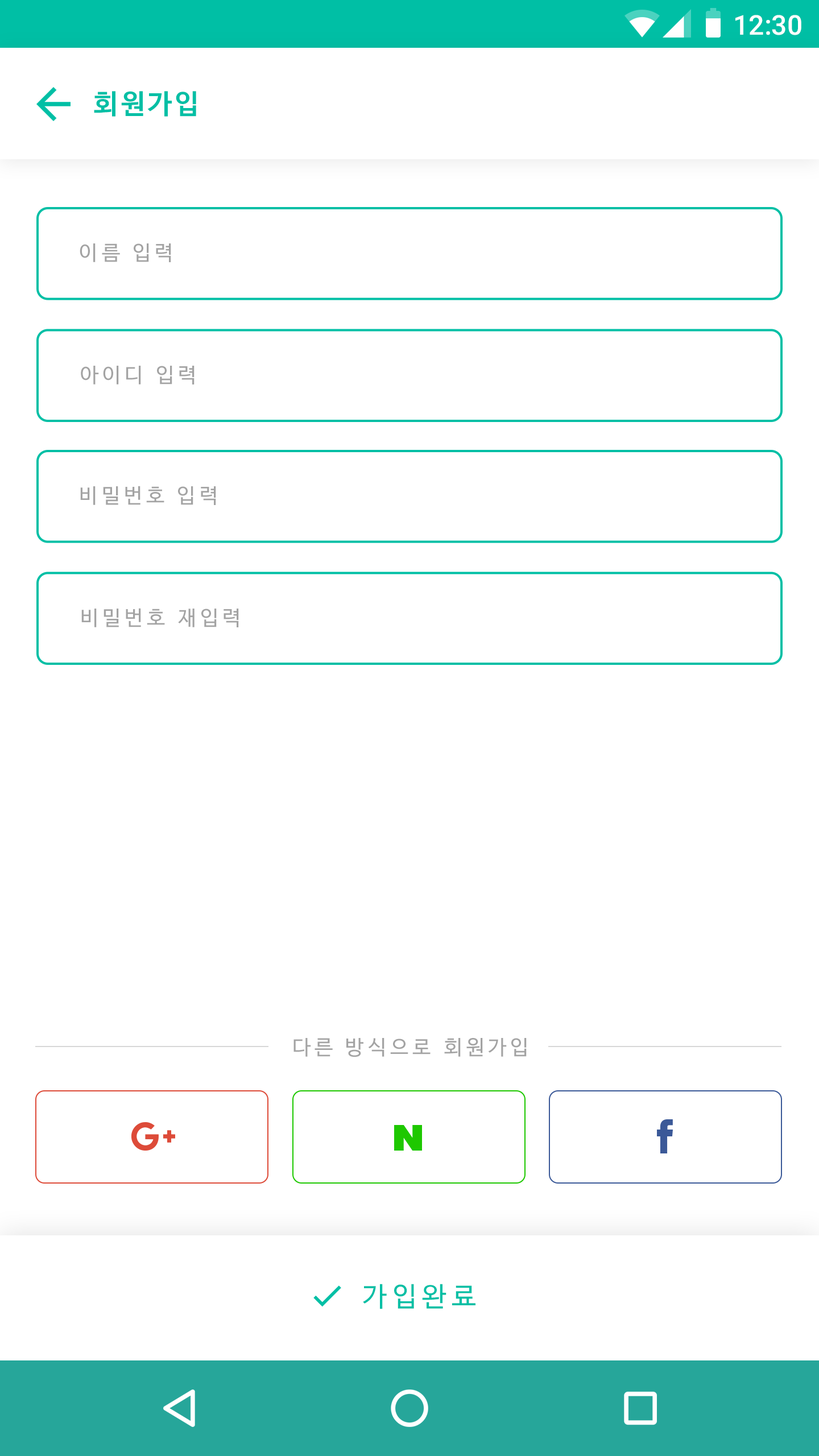
<style>
.page{position:relative;width:819px;height:1456px;background:#ffffff}
.page>*{position:absolute;margin:0}
.t1{font:27.3px "Roboto-Medium";color:#ffffff}
.t2{font:27.3px "NanumBarunGothicBold";letter-spacing:0.1em;color:#00bfa5}
.t3{font:20.5px "NanumBarunGothic";letter-spacing:0.2em;color:#a3a3a3}
.t4{font:27.1px "NanumBarunGothic";letter-spacing:0.2em;color:#00bfa5}
</style>
<div class="page">
<p class="t1" style="left:735px;top:15px;width:66px;height:20px">12:30</p>
<p class="t2" style="left:94px;top:91px;width:102px;height:26px">회원가입</p>
<p class="t3" style="left:80px;top:243px;width:91px;height:19px">이름 입력</p>
<p class="t3" style="left:81px;top:366px;width:114px;height:18px">아이디 입력</p>
<p class="t3" style="left:80px;top:486px;width:136px;height:19px">비밀번호 입력</p>
<p class="t3" style="left:81px;top:608px;width:158px;height:19px">비밀번호 재입력</p>
<p class="t3" style="left:293px;top:1038px;width:234px;height:19px">다른 방식으로 회원가입</p>
<p class="t4" style="left:363px;top:1284px;width:112px;height:25px">가입완료</p>
</div>
